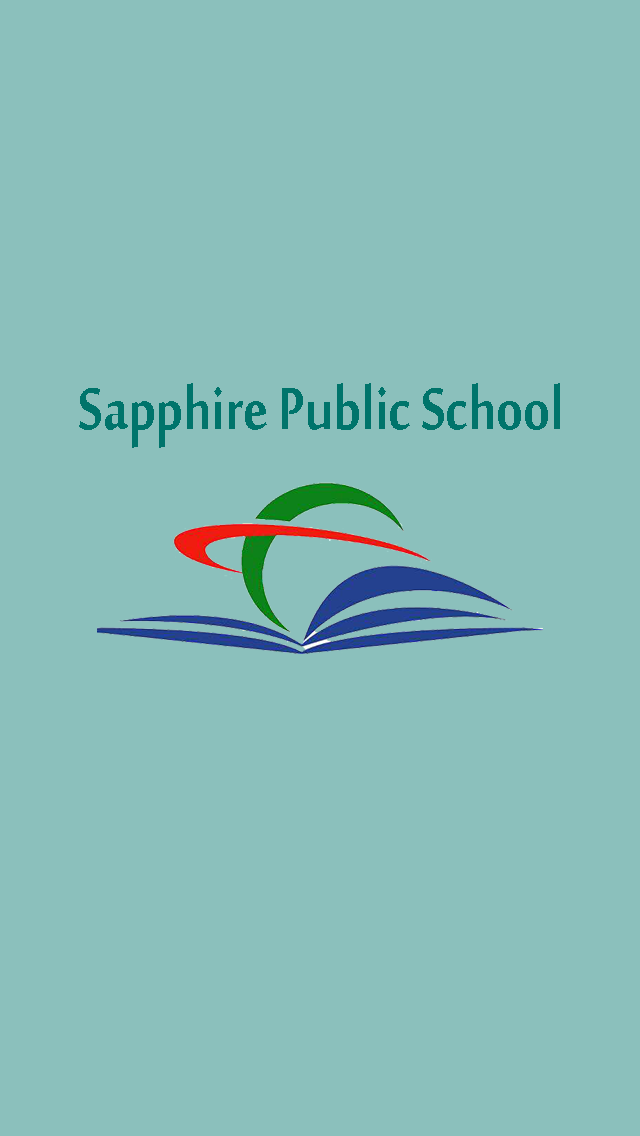
<style>
.page{position:relative;width:640px;height:1136px;background:#8bc0bc}
.page>*{position:absolute;margin:0}
.t1{font:90px "MoolBoran";color:#00746b;scale:0.84 1}
</style>
<div class="page">
<p class="t1" style="left:79px;top:383px;width:481px;height:65px">Sapphire Public School</p>
</div>
